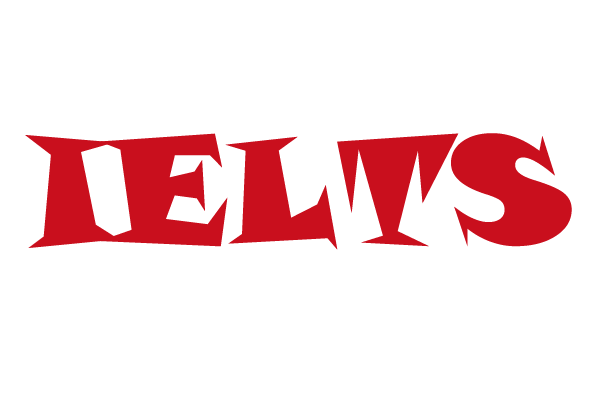
<style>
.page{position:relative;width:609px;height:409px;background:#ffffff}
.page>*{position:absolute;margin:0}
.t1{font:150px "SnapITC-Regular";color:#c90f1d}
</style>
<div class="page">
<p class="t1" style="left:25px;top:133px;width:547px;height:117px">IELTS</p>
</div>
